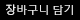
<style>
.page{position:relative;width:80px;height:20px;background:#000000}
.page>*{position:absolute;margin:0}
.t1{font:11px "MalgunGothic-Semilight";color:#ffffff}
</style>
<div class="page">
<p class="t1" style="left:6px;top:4px;width:67px;height:11px">장바구니 담기</p>
</div>
